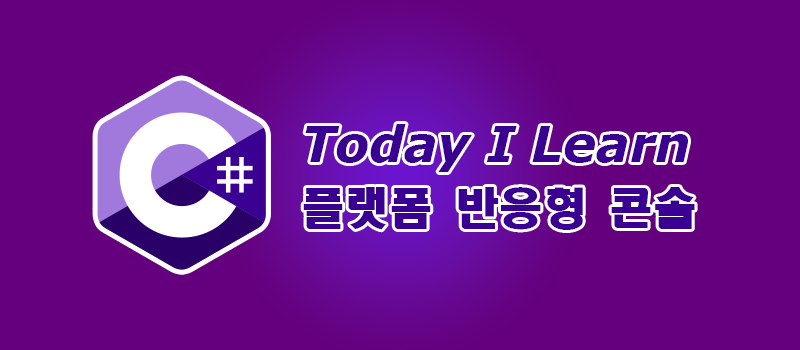
<style>
.page{position:relative;width:800px;height:350px;background:#64007d}
.page>*{position:absolute;margin:0}
.t1{font:50px "Verdana-BoldItalic";color:#390091}
.t2{font:44px "HeadlineR-HM";color:#390091}
</style>
<div class="page">
<p class="t1" style="left:305px;top:124px;width:383px;height:48px">Today I Learn</p>
<p class="t2" style="left:303px;top:187px;width:392px;height:43px">플랫폼 반응형 콘솔</p>
</div>
